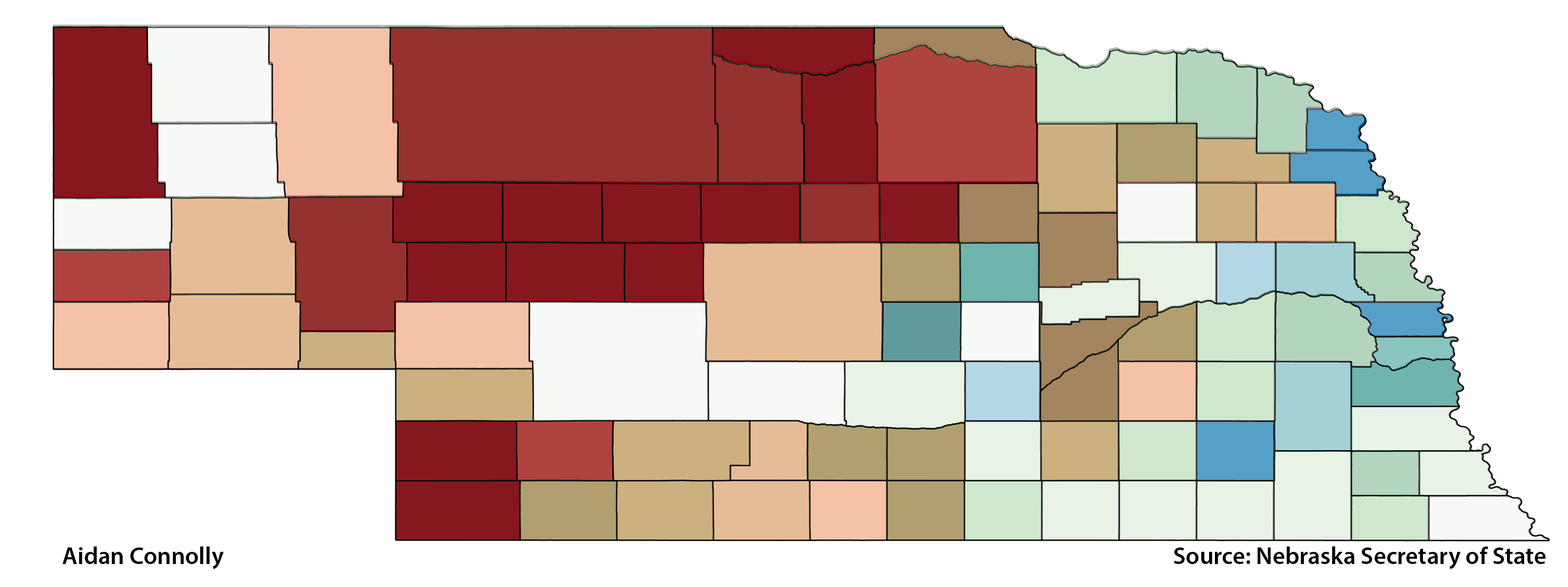
<style>
.page{position:relative;width:1568px;height:587px;background:#ffffff}
.page>*{position:absolute;margin:0}
.t1{font:24.4px "MyriadPro-Semibold";color:#000000}
</style>
<div class="page">
<p class="t1" style="left:63px;top:546px;width:161px;height:23px">Aidan Connolly</p>
<p class="t1" style="left:1174px;top:546px;width:372px;height:23px">Source: Nebraska Secretary of State</p>
</div>
